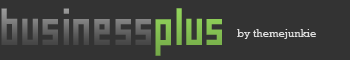
<style>
.page{position:relative;width:350px;height:60px;background:#333333}
.page>*{position:absolute;margin:0}
.t1{font:52px "Statix"}
.t2{font:52px "Statix";color:#83be52}
.t3{font:11px "Rockwell";color:#dddddd}
</style>
<div class="page">
<p class="t1" style="left:1px;top:8px;width:150px;height:37px">business</p>
<p class="t2" style="left:155px;top:8px;width:67px;height:48px">plus</p>
<p class="t3" style="left:237px;top:29px;width:79px;height:10px">by themejunkie</p>
</div>
